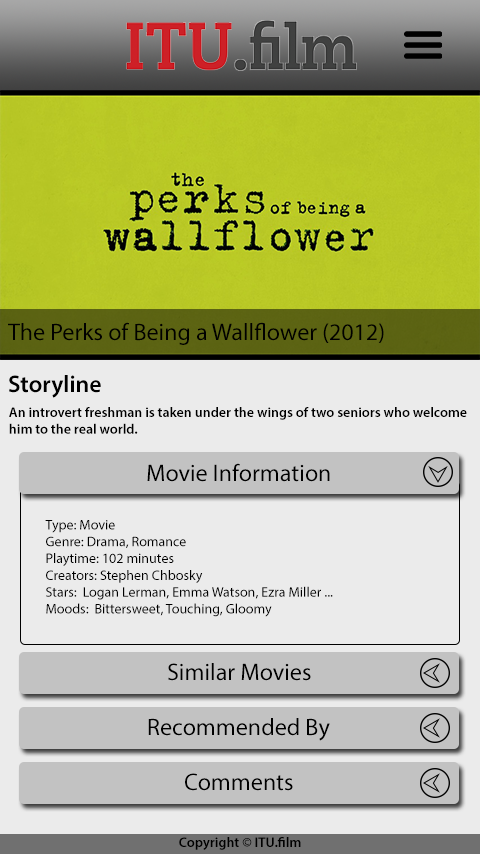
<style>
.page{position:relative;width:480px;height:854px;background:#ebebeb}
.page>*{position:absolute;margin:0}
.t1{font:24px "MyriadPro-Regular";color:#000000}
.t2{font:24px "MyriadPro-Semibold";color:#000000}
.t3{font:14px "MyriadPro-Semibold";color:#000000}
.t4{font:14px "MyriadPro-Regular";color:#000000}
</style>
<div class="page">
<p class="t1" style="left:8px;top:322px;width:376px;height:23px">The Perks of Being a Wallflower (2012)</p>
<p class="t2" style="left:9px;top:375px;width:92px;height:23px">Storyline</p>
<p class="t3" style="left:9px;top:407px;width:458px;height:27px">An introvert freshman is taken under the wings of two seniors who welcome him to the real world.</p>
<p class="t1" style="left:147px;top:463px;width:183px;height:19px">Movie Information</p>
<p class="t4" style="left:45px;top:520px;width:288px;height:97px">Type: Movie<br>Genre: Drama, Romance<br>Playtime: 102 minutes<br>Creators: Stephen Chbosky<br>Stars:  Logan Lerman, Emma Watson, Ezra Miller ... <br>Moods:  Bittersweet, Touching, Gloomy</p>
<p class="t1" style="left:168px;top:663px;width:143px;height:18px">Similar Movies</p>
<p class="t1" style="left:148px;top:718px;width:182px;height:23px">Recommended By</p>
<p class="t1" style="left:185px;top:773px;width:108px;height:18px">Comments</p>
<p class="t3" style="left:179px;top:837px;width:122px;height:13px">Copyright © ITU.film</p>
</div>
